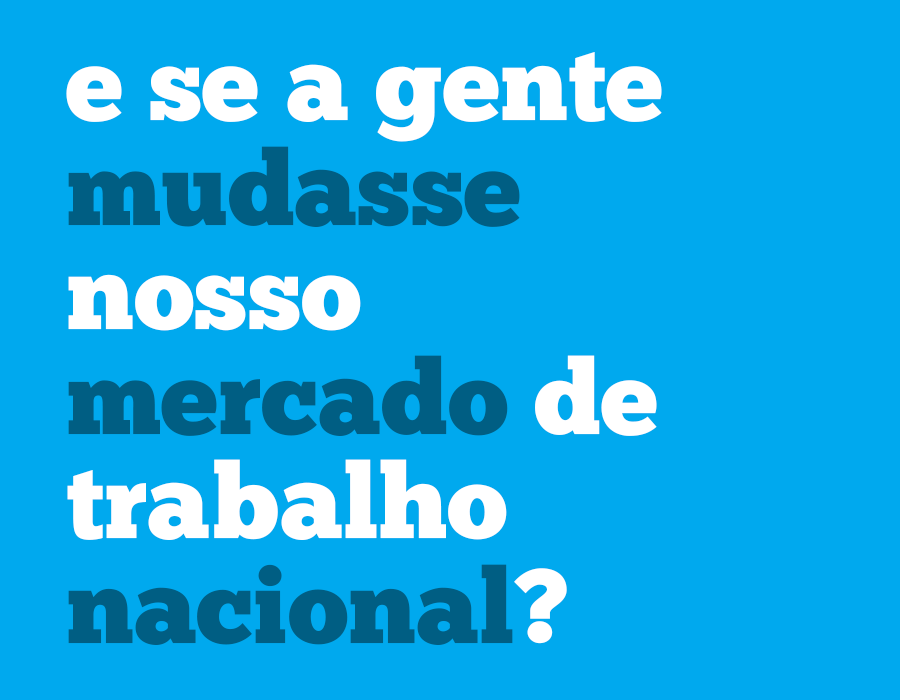
<style>
.page{position:relative;width:900px;height:700px;background:#00a9ee}
.page>*{position:absolute;margin:0}
.t1{font:104.5px/104.5px "ChunkFive-Roman";color:#ffffff}
.t2{font:104.5px/104.5px "ChunkFive-Roman";color:#005e83}
</style>
<div class="page">
<p class="t1" style="left:66px;top:52px;width:596px;height:593px">e se a gente<br><span class="t2">mudasse<br></span>nosso<br><span class="t2">mercado</span> de<br>trabalho<br><span class="t2">nacional</span>?</p>
</div>
